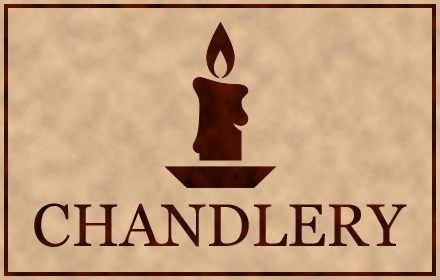
<style>
.page{position:relative;width:440px;height:280px}
.page>*{position:absolute;margin:0}
.t1{font:60px "Georgia";color:#3b0d00}
</style>
<div class="page">
<p class="t1" style="left:34px;top:203px;width:373px;height:44px">CHANDLERY</p>
</div>
